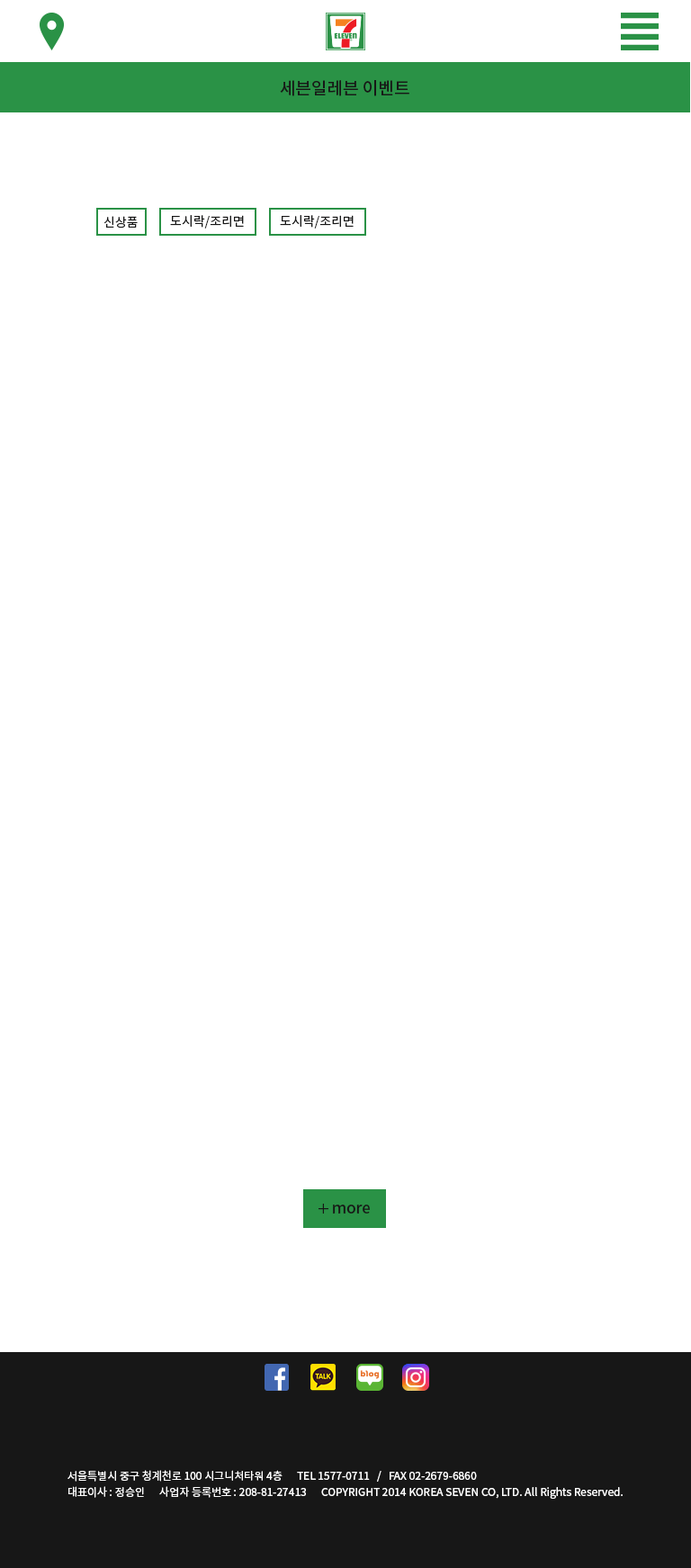
<style>
.page{position:relative;width:691px;height:1568px;background:#ffffff}
.page>*{position:absolute;margin:0}
.t1{font:17.1px "NotoSansCJKkr-Medium";color:#171717}
.t2{font:12.6px "NotoSansCJKkr-Regular";color:#171717}
.t3{font:15.3px "NotoSansCJKkr-Medium";color:#171717}
.t4{font:10.8px/16.2px "NotoSansCJKkr-Regular";color:#ffffff}
</style>
<div class="page">
<p class="t1" style="left:280px;top:80px;width:129px;height:16px">세븐일레븐 이벤트</p>
<p class="t2" style="left:104px;top:216px;width:34px;height:12px">신상품</p>
<p class="t2" style="left:170px;top:215px;width:74px;height:13px">도시락/조리면</p>
<p class="t2" style="left:280px;top:215px;width:74px;height:13px">도시락/조리면</p>
<p class="t3" style="left:333px;top:1205px;width:37px;height:9px">more</p>
<p class="t4" style="left:67px;top:1470px;width:556px;height:29px">서울특별시 중구 청계천로 100 시그니처타워 4층      TEL 1577-0711   /   FAX 02-2679-6860<br>대표이사 : 정승인      사업자 등록번호 : 208-81-27413      COPYRIGHT 2014 KOREA SEVEN CO, LTD. All Rights Reserved.</p>
</div>
